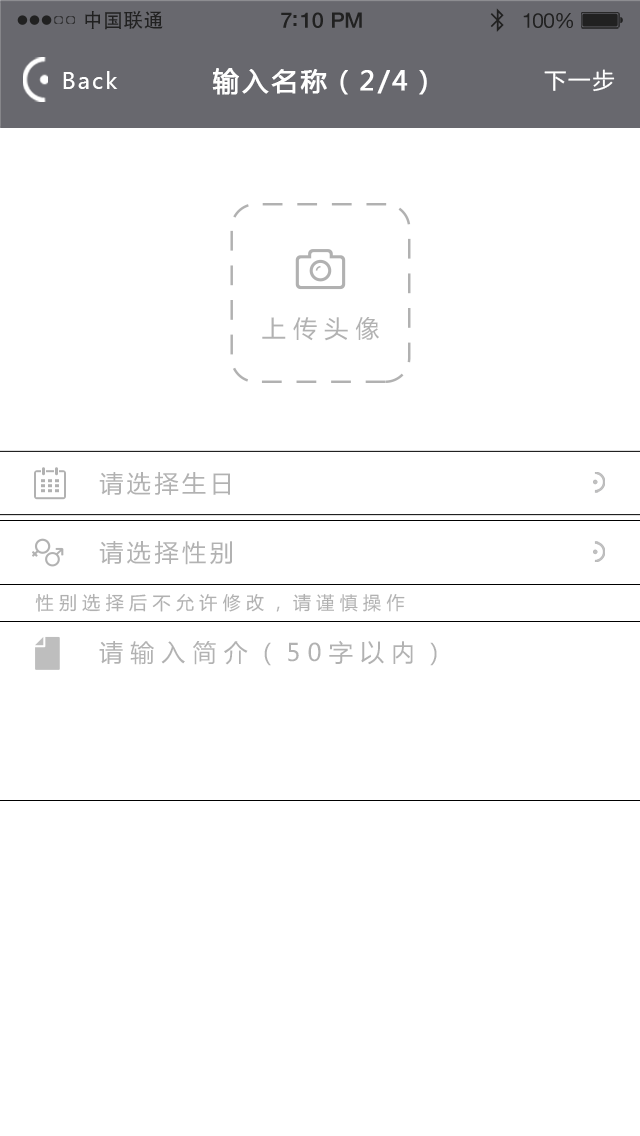
<style>
.page{position:relative;width:640px;height:1136px;background:#ffffff}
.page>*{position:absolute;margin:0}
.t1{font:19.7px "AdobeHeitiStd-Regular";letter-spacing:0.02em;color:#212121}
.t2{font:21.4px "HelveticaNeue-Medium";letter-spacing:-0.02em;color:#212121}
.t3{font:20.6px "HelveticaNeue";letter-spacing:-0.02em;color:#212121}
.t4{font:22px "MicrosoftYaHei";letter-spacing:0.1em;color:#ffffff}
.t5{font:26px "MicrosoftYaHei";letter-spacing:0.1em;color:#ffffff;font-weight:bold}
.t6{font:24px "MicrosoftYaHei";letter-spacing:0.3em;color:#b2b2b2}
.t7{font:24px "MicrosoftYaHei";letter-spacing:0.15em;color:#b2b2b2}
.t8{font:18px "MicrosoftYaHei";letter-spacing:0.3em;color:#b1b1b1}
</style>
<div class="page">
<p class="t1" style="left:85px;top:10px;width:78px;height:20px">中国联通</p>
<p class="t2" style="left:281px;top:12px;width:81px;height:16px">7:10 PM</p>
<p class="t3" style="left:523px;top:13px;width:50px;height:16px">100%</p>
<p class="t4" style="left:63px;top:71px;width:55px;height:18px">Back</p>
<p class="t5" style="left:212px;top:68px;width:215px;height:27px">输入名称（2/4）</p>
<p class="t4" style="left:544px;top:69px;width:71px;height:23px">下一步</p>
<p class="t6" style="left:262px;top:317px;width:117px;height:24px">上传头像</p>
<p class="t7" style="left:99px;top:472px;width:131px;height:23px">请选择生日</p>
<p class="t7" style="left:99px;top:541px;width:133px;height:24px">请选择性别</p>
<p class="t8" style="left:35px;top:593px;width:370px;height:19px">性别选择后不允许修改，请谨慎操作</p>
<p class="t6" style="left:99px;top:640px;width:338px;height:26px">请输入简介（50字以内）</p>
</div>
